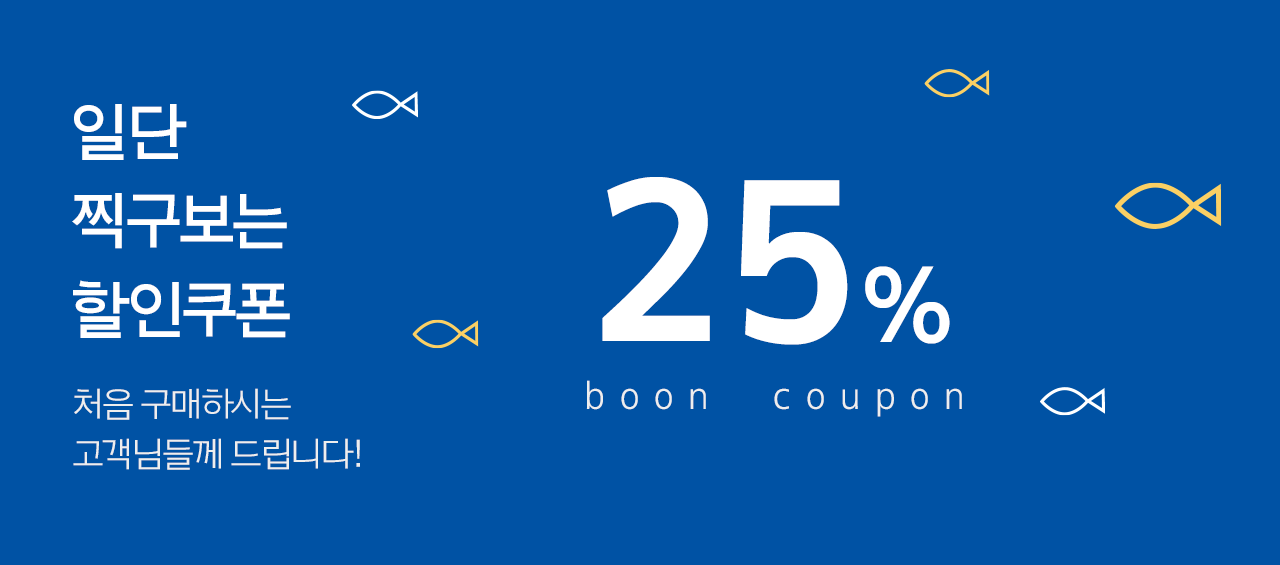
<style>
.page{position:relative;width:1280px;height:565px;background:#0052a4}
.page>*{position:absolute;margin:0}
.t1{font:64px/88.8px "Arita-dotum-SemiBold_TTF";letter-spacing:-0.06em;color:#ffffff}
.t2{font:231px "Arita-dotum-Bold_TTF";color:#ffffff}
.t3{font:106.6px "Arita-dotum-SemiBold_TTF";color:#ffffff}
.t4{font:35.5px/49.7px "Arita-dotum-Medium_TTF";letter-spacing:-0.06em;color:#eeeeee}
.t5{font:39.1px "Arita-dotum-Medium_TTF";letter-spacing:0.05em;color:#eeeeee}
</style>
<div class="page">
<p class="t1" style="left:72px;top:104px;width:218px;height:234px">일단<br>찍구보는<br>할인쿠폰</p>
<p class="t2" style="left:602px;top:177px;width:348px;height:168px">25<span class="t3">%</span></p>
<p class="t4" style="left:73px;top:388px;width:287px;height:82px">처음 구매하시는<br>고객님들께 드립니다!</p>
<p class="t5" style="left:586px;top:380px;width:376px;height:37px">b o o n     c o u p o n</p>
</div>
